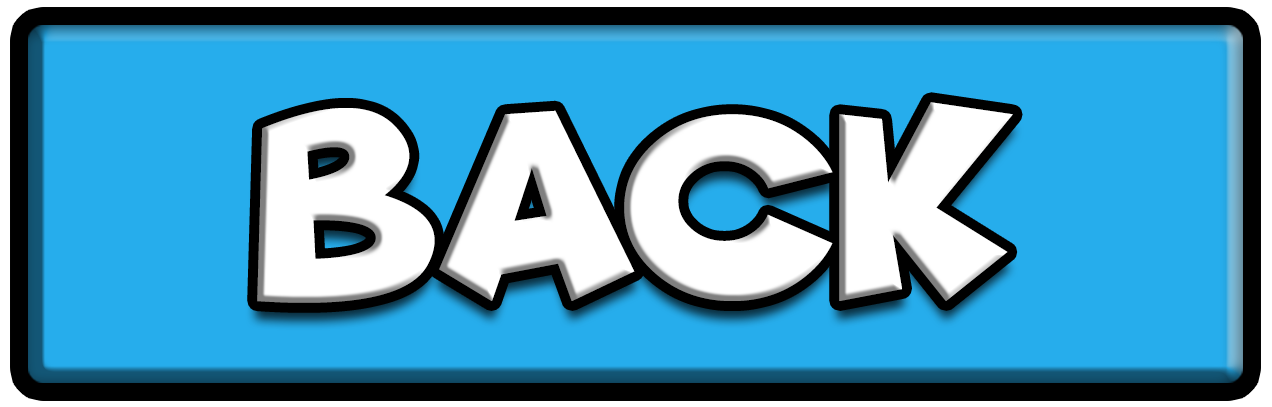
<style>
.page{position:relative;width:1272px;height:407px;background:#26adec}
.page>*{position:absolute;margin:0}
.t1{font:273.1px "Funhouse";color:#ffffff}
</style>
<div class="page">
<p class="t1" style="left:257px;top:102px;width:756px;height:201px">BACK</p>
</div>
